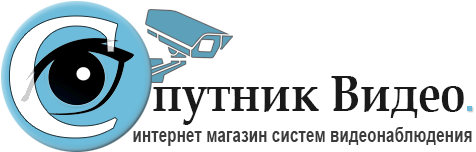
<style>
.page{position:relative;width:476px;height:152px;background:#ffffff}
.page>*{position:absolute;margin:0}
.t1{font:171.4px "BookAntiqua-Bold";color:#e7e7e7;scale:0.97 1}
.t2{font:51.3px "BookAntiqua-Bold";color:#1a1a1a;scale:0.89 1}
.t3{font:19.5px "Arial-BoldMT";color:#3b3b3b;scale:0.79 1}
</style>
<div class="page">
<p class="t1" style="left:9px;top:16px;width:109px;height:122px">С</p>
<p class="t2" style="left:153px;top:76px;width:311px;height:49px">путник Видео</p>
<p class="t3" style="left:133px;top:127px;width:339px;height:19px">интернет магазин систем видеонаблюдения</p>
</div>
